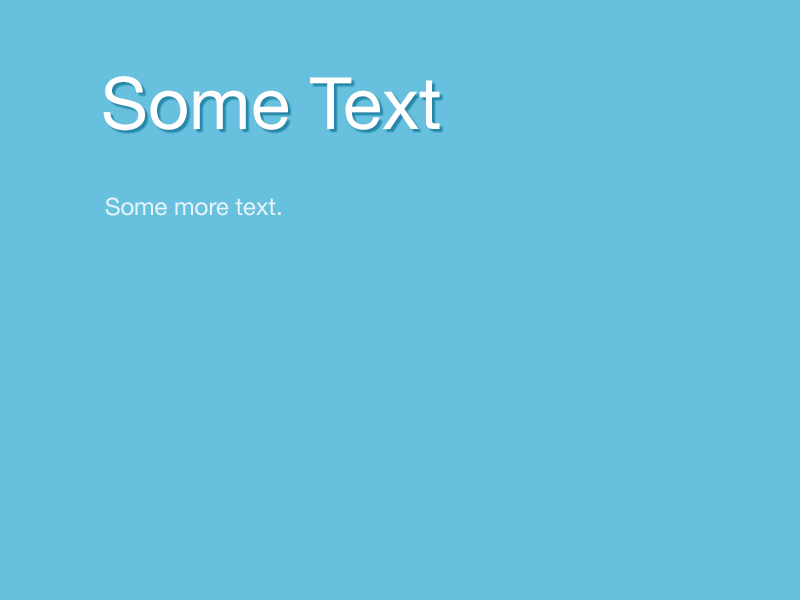
<style>
.page{position:relative;width:800px;height:600px;background:#66c0de}
.page>*{position:absolute;margin:0}
.t1{font:72px "HelveticaNeue";color:#ffffff}
.t2{font:24px "HelveticaNeue";color:#e4f3f8}
</style>
<div class="page">
<p class="t1" style="left:103px;top:76px;width:337px;height:55px">Some Text</p>
<p class="t2" style="left:105px;top:197px;width:176px;height:19px">Some more text.</p>
</div>
